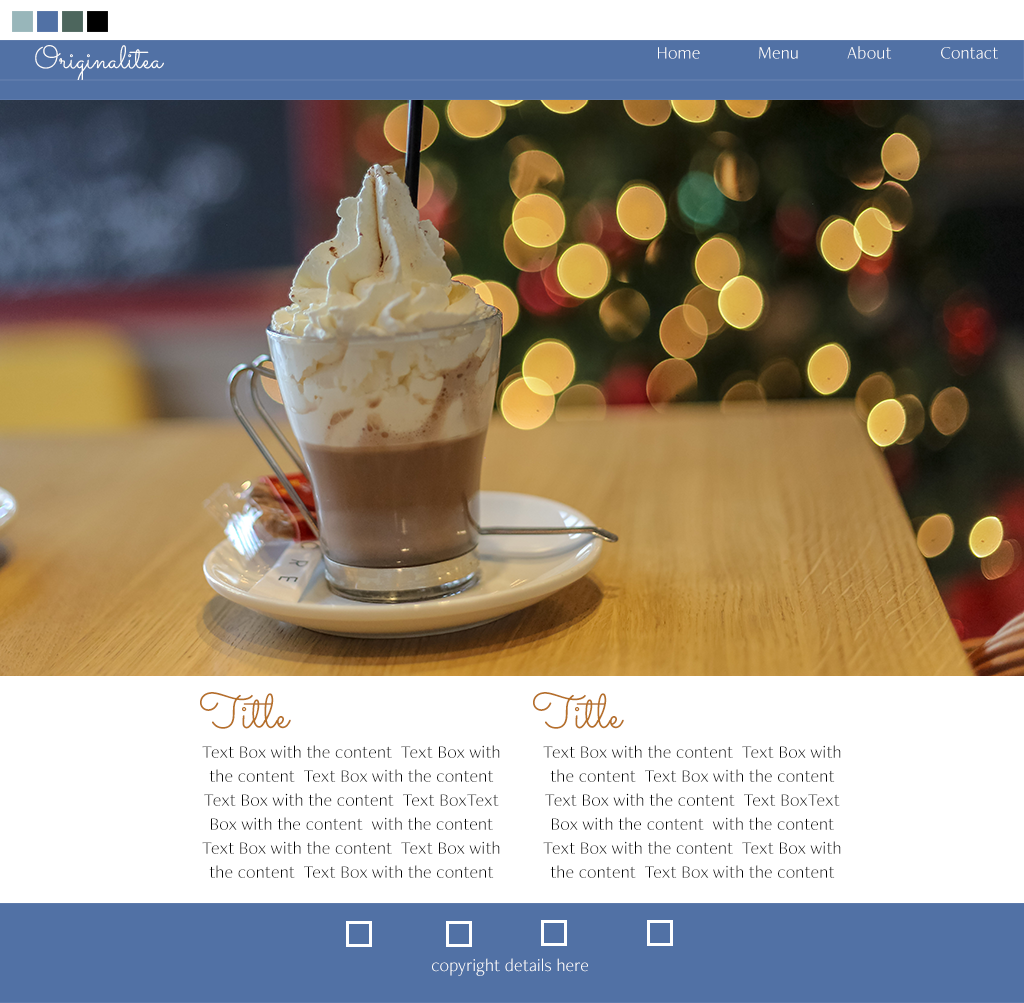
<style>
.page{position:relative;width:1024px;height:1003px;background:#ffffff}
.page>*{position:absolute;margin:0}
.t1{font:32px "Sacramento-Regular";letter-spacing:0.01em;color:#fcfcfc}
.t2{font:18px "FreightNeoProLight-Regular";letter-spacing:0.01em;color:#ffffff}
.t3{font:48px "Sacramento-Regular";letter-spacing:0.01em;color:#b67029}
.t4{font:18px/24px "FreightNeoProLight-Regular";letter-spacing:0.01em;color:#040404}
</style>
<div class="page">
<p class="t1" style="left:35px;top:45px;width:129px;height:40px">Originalitea</p>
<p class="t2" style="left:658px;top:47px;width:42px;height:12px">Home</p>
<p class="t2" style="left:759px;top:47px;width:39px;height:12px">Menu</p>
<p class="t2" style="left:847px;top:46px;width:45px;height:13px">About</p>
<p class="t2" style="left:941px;top:47px;width:57px;height:12px">Contact</p>
<p class="t3" style="left:200px;top:692px;width:91px;height:37px">Title</p>
<p class="t3" style="left:533px;top:692px;width:91px;height:37px">Title</p>
<p class="t4" style="left:202px;top:745px;width:298px;height:133px;text-align:center">Text Box with the content  Text Box with the content  Text Box with the content  Text Box with the content  Text BoxText Box with the content  with the content  Text Box with the content  Text Box with the content  Text Box with the content</p>
<p class="t4" style="left:543px;top:745px;width:298px;height:133px;text-align:center">Text Box with the content  Text Box with the content  Text Box with the content  Text Box with the content  Text BoxText Box with the content  with the content  Text Box with the content  Text Box with the content  Text Box with the content</p>
<p class="t2" style="left:432px;top:958px;width:156px;height:18px">copyright details here</p>
</div>
